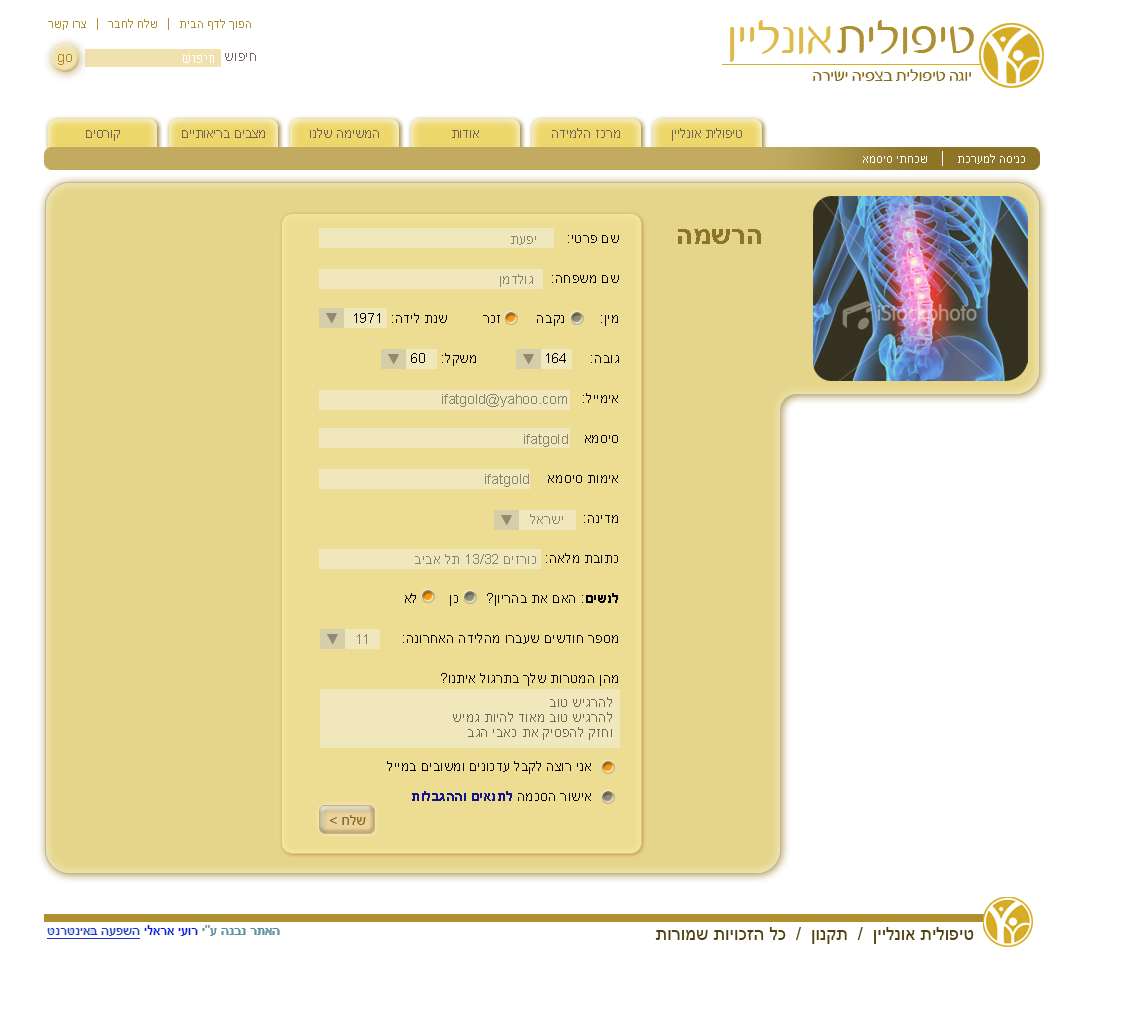
<style>
.page{position:relative;width:1121px;height:1031px;background:#ffffff}
.page>*{position:absolute;margin:0}
.t1{font:28px "Arial-BoldMT";color:#8d7527}
.t2{font:14px/40px "ArialMT";color:#000000}
.t3{font:14px/40px "Arial-BoldMT";color:#000000}
.t4{font:14px/44px "ArialMT";color:#000000}
.t5{font:14px/30px "ArialMT";color:#000000}
.t6{font:14px/30px "Arial-BoldMT";color:#12158d}
.t7{font:14px/40px "ArialMT";color:#87826a}
.t8{font:14px/15px "ArialMT";color:#6c6855}
.t9{font:14px "ArialMT";color:#846d25}
.t10{font:18px "ArialMT";color:#4f410e}
</style>
<div class="page">
<p class="t1" style="left:678px;top:229px;width:83px;height:15px">הרשמה</p>
<p class="t2" style="left:354px;top:235px;width:265px;height:566px">שם פרטי:<br>שם משפחה:<br>מין:         נקבה         זכר         שנת לידה:  1971<br>גובה:      164                 משקל:    60                                      אימייל:<br>סיסמא<br>אימות סיסמא<br>מדינה:    <br>כתובת מלאה:<br><span class="t3">לנשים</span>: האם את בהריון?       כן        לא<br>מספר חודשים שעברו מהלידה האחרונה:                     מהן המטרות שלך בתרגול איתנו?<br><span class="t4"><br>       אני רוצה לקבל עדכונים ומשובים במייל<br></span><span class="t5">       אישור הסכמה </span><span class="t6">לתנאים וההגבלות</span></p>
<p class="t7" style="left:357px;top:236px;width:211px;height:408px">יפעת<br>         גולדמן<br><br><br>ifatgold@yahoo.com<br>ifatgold                                                                                              <br>          ifatgold      <br> ישראל<br>        כורזים 13/32 תל אביב                                              <br><br>                                                   11</p>
<p class="t8" style="left:453px;top:697px;width:159px;height:43px">להרגיש טוב<br>להרגיש טוב מאוד להיות גמיש <br>וחזק להפסיק את כאבי הגב</p>
<p class="t9" style="left:329px;top:815px;width:37px;height:10px">שלח &gt;</p>
<p class="t10" style="left:655px;top:927px;width:319px;height:17px">טיפולית אונליין  /  תקנון  /  כל הזכויות שמורות</p>
</div>
